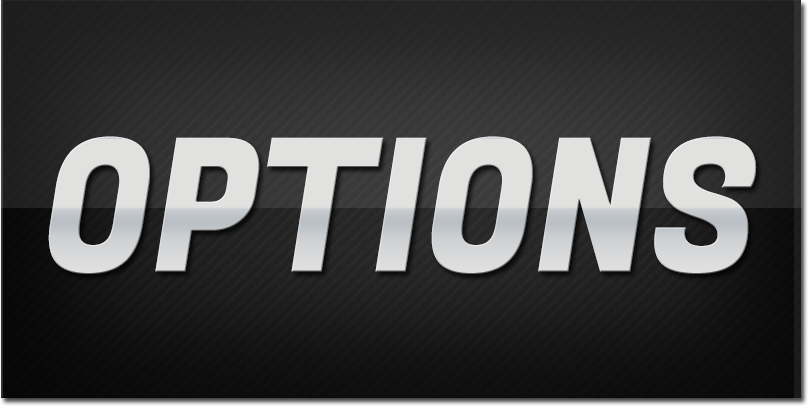
<style>
.page{position:relative;width:808px;height:406px}
.page>*{position:absolute;margin:0}
.t1{font:185.2px "FugazOne-Regular";color:#dfdfdf;scale:0.89 1}
</style>
<div class="page">
<p class="t1" style="left:48px;top:136px;width:709px;height:138px">OPTIONS</p>
</div>
